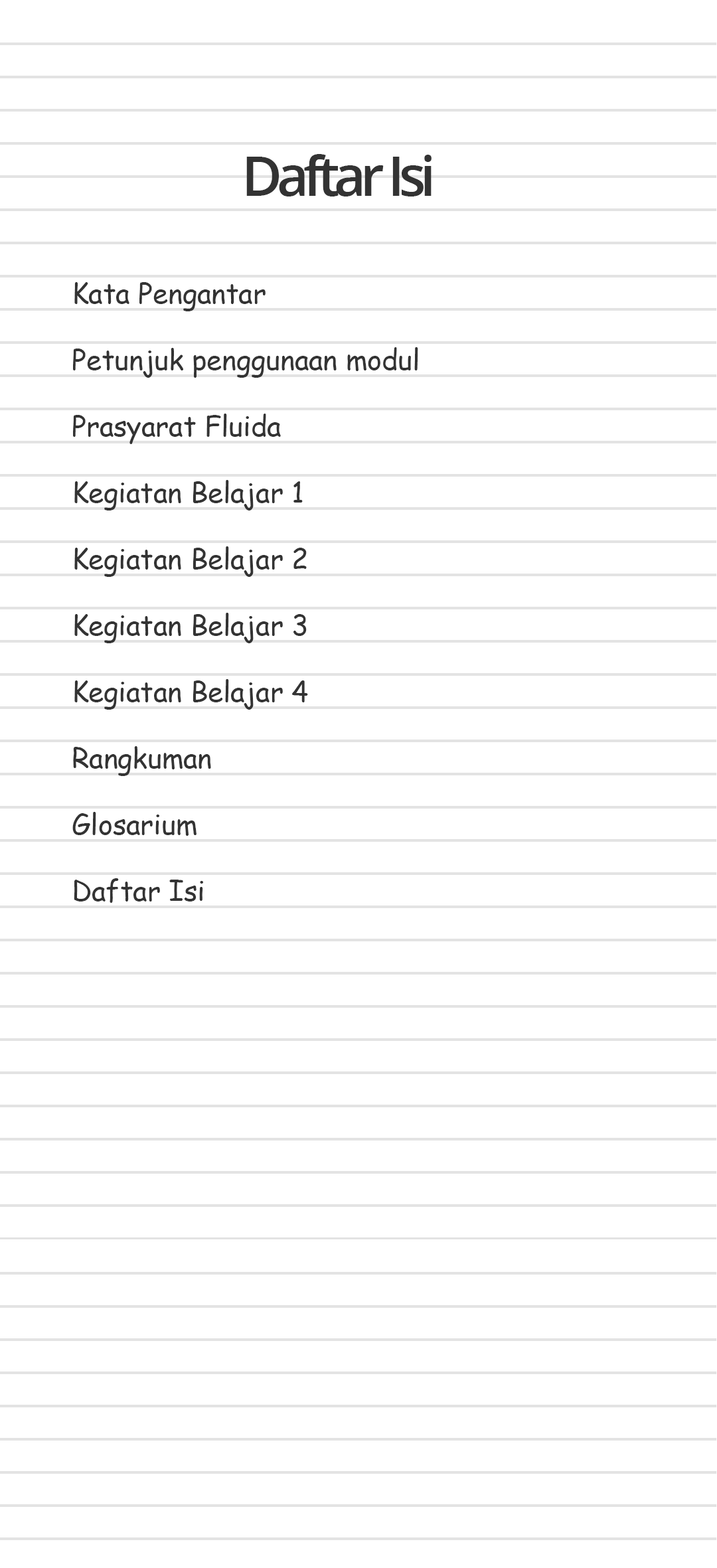
<style>
.page{position:relative;width:717px;height:1568px;background:#ffffff}
.page>*{position:absolute;margin:0}
.t1{font:55.3px "OpenSans-SemiBold";letter-spacing:-0.1em;color:#333333}
.t2{font:27.7px/33.2px "ComicSansMS";color:#333333}
</style>
<div class="page">
<p class="t1" style="left:246px;top:154px;width:185px;height:42px">Daftar Isi</p>
<p class="t2" style="left:72px;top:282px;width:346px;height:621px;text-align:justify">Kata Pengantar<br><br>Petunjuk penggunaan modul<br><br>Prasyarat Fluida<br><br>Kegiatan Belajar 1<br><br>Kegiatan Belajar 2<br><br>Kegiatan Belajar 3<br><br>Kegiatan Belajar 4<br><br>Rangkuman<br><br>Glosarium<br><br>Daftar Isi</p>
</div>
